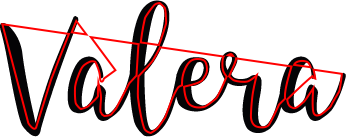
<style>
.page{position:relative;width:346px;height:137px;background:#ffffff}
.page>*{position:absolute;margin:0}
.t1{font:120px "KingBasilLite-Regular";color:#040406}
</style>
<div class="page">
<p class="t1" style="left:0px;top:0px;width:346px;height:137px">Valera</p>
</div>
